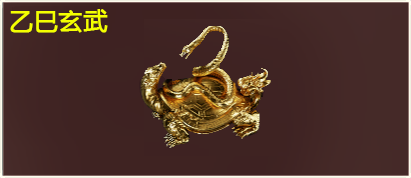
<style>
.page{position:relative;width:411px;height:178px}
.page>*{position:absolute;margin:0}
.t1{font:24px "MicrosoftYaHeiUI";color:#f4ff00;font-weight:bold}
</style>
<div class="page">
<p class="t1" style="left:10px;top:9px;width:98px;height:24px">乙巳玄武</p>
</div>
